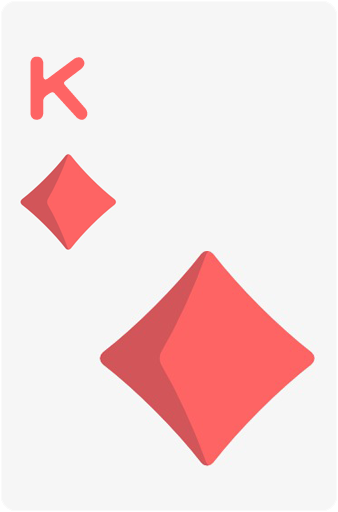
<style>
.page{position:relative;width:338px;height:512px;background:#f6f6f6}
.page>*{position:absolute;margin:0}
.t1{font:72px "JPTY";letter-spacing:0.075em;color:#fe6464}
</style>
<div class="page">
<p class="t1" style="left:30px;top:56px;width:58px;height:64px">K</p>
</div>
